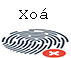
<style>
.page{position:relative;width:71px;height:58px;background:#ffffff}
.page>*{position:absolute;margin:0}
.t1{font:16px "CourierNewPSMT";color:#000000}
</style>
<div class="page">
<p class="t1" style="left:19px;top:8px;width:29px;height:11px">Xoá</p>
</div>
